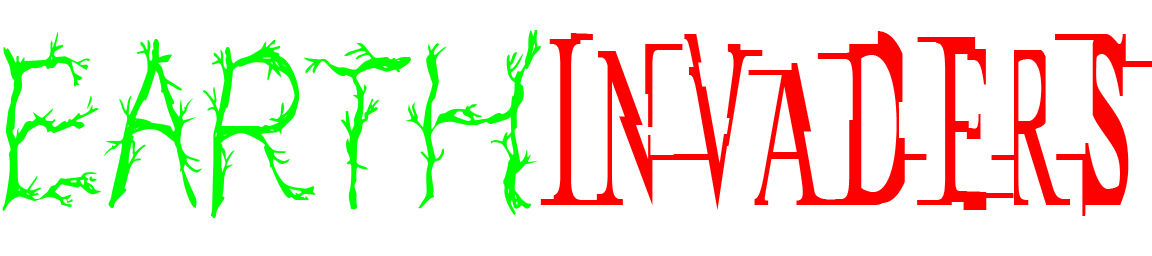
<style>
.page{position:relative;width:1152px;height:256px;background:#ffffff}
.page>*{position:absolute;margin:0}
.t1{font:221.3px "CFPrettyTrees-Regular";color:#00ff00;scale:0.86 1}
.t2{font:237.9px "Miltown";color:#ff0000;scale:0.36 1}
</style>
<div class="page">
<p class="t1" style="left:2px;top:30px;width:539px;height:188px">EARTH</p>
<p class="t2" style="left:540px;top:31px;width:613px;height:185px">INVADERS</p>
</div>
